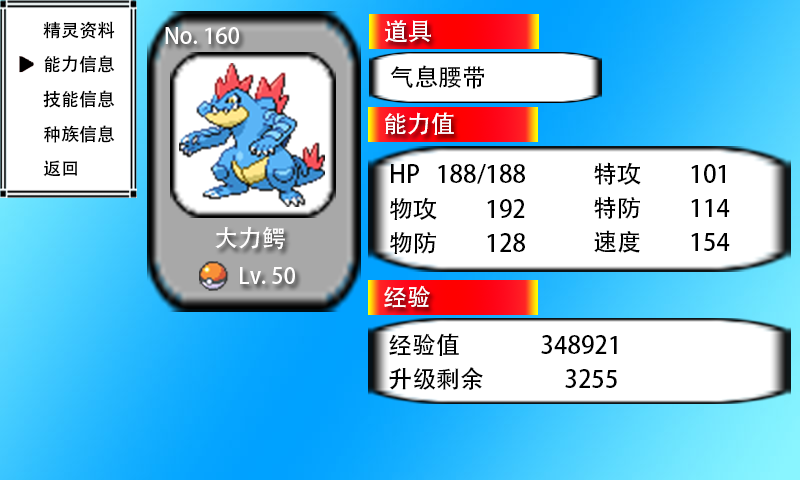
<style>
.page{position:relative;width:800px;height:480px;background:#ffffff}
.page>*{position:absolute;margin:0}
.t1{font:18px "AdobeHeitiStd-Regular";color:#000000}
.t2{font:22px "AdobeHeitiStd-Regular";color:#fffefe}
.t3{font:24px "AdobeHeitiStd-Regular";color:#fffefe}
.t4{font:24px "AdobeHeitiStd-Regular";color:#000000}
</style>
<div class="page">
<p class="t1" style="left:43px;top:21px;width:72px;height:18px">精灵资料</p>
<p class="t2" style="left:165px;top:27px;width:74px;height:17px">No. 160</p>
<p class="t3" style="left:385px;top:20px;width:46px;height:23px">道具</p>
<p class="t1" style="left:44px;top:55px;width:71px;height:18px">能力信息</p>
<p class="t4" style="left:390px;top:65px;width:94px;height:24px">气息腰带</p>
<p class="t1" style="left:43px;top:90px;width:72px;height:18px">技能信息</p>
<p class="t3" style="left:385px;top:112px;width:69px;height:23px">能力值</p>
<p class="t1" style="left:44px;top:125px;width:71px;height:18px">种族信息</p>
<p class="t1" style="left:43px;top:160px;width:34px;height:17px">返回</p>
<p class="t4" style="left:391px;top:164px;width:134px;height:20px">HP   188/188</p>
<p class="t4" style="left:594px;top:162px;width:131px;height:23px">特攻         101</p>
<p class="t4" style="left:390px;top:197px;width:135px;height:23px">物攻         192</p>
<p class="t4" style="left:594px;top:196px;width:136px;height:23px">特防         114</p>
<p class="t3" style="left:215px;top:226px;width:70px;height:24px">大力鳄</p>
<p class="t4" style="left:390px;top:232px;width:135px;height:22px">物防         128</p>
<p class="t4" style="left:594px;top:230px;width:136px;height:23px">速度         154</p>
<p class="t2" style="left:240px;top:267px;width:55px;height:17px">Lv. 50</p>
<p class="t3" style="left:384px;top:285px;width:46px;height:23px">经验</p>
<p class="t4" style="left:389px;top:333px;width:228px;height:23px">经验值               348921</p>
<p class="t4" style="left:389px;top:367px;width:228px;height:23px">升级剩余               3255</p>
</div>
